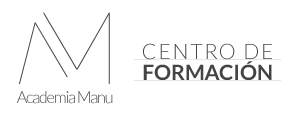
<style>
.page{position:relative;width:294px;height:116px;background:#ffffff}
.page>*{position:absolute;margin:0}
.t1{font:21.3px "Lato-Light";letter-spacing:0.08em;color:#444444;text-transform:uppercase}
.t2{font:21.4px "Lato-Bold";color:#444444;text-transform:uppercase}
.t3{font:16.4px "Lato-Light";letter-spacing:-0.075em}
</style>
<div class="page">
<p class="t1" style="left:143px;top:43px;width:129px;height:17px">Centro de</p>
<p class="t2" style="left:143px;top:61px;width:129px;height:19px">Formación</p>
<p class="t3" style="left:16px;top:91px;width:97px;height:13px">Academia Manu</p>
</div>
